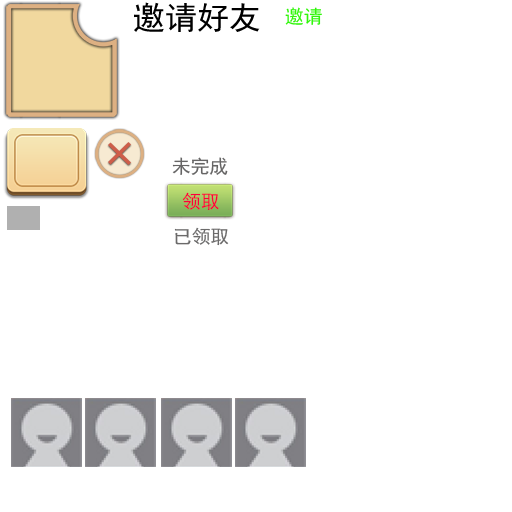
<style>
.page{position:relative;width:512px;height:512px;background:#ffffff}
.page>*{position:absolute;margin:0}
.t1{font:18.7px "SimHei";color:#666565}
.t2{font:18.7px "SimHei";color:#fc003b}
.t3{font:18.7px "SimHei";color:#6b6a6a}
</style>
<div class="page">
<p class="t1" style="left:172px;top:157px;width:56px;height:18px">未完成</p>
<p class="t2" style="left:182px;top:192px;width:37px;height:19px">领取</p>
<p class="t3" style="left:174px;top:227px;width:55px;height:19px">已领取</p>
</div>
